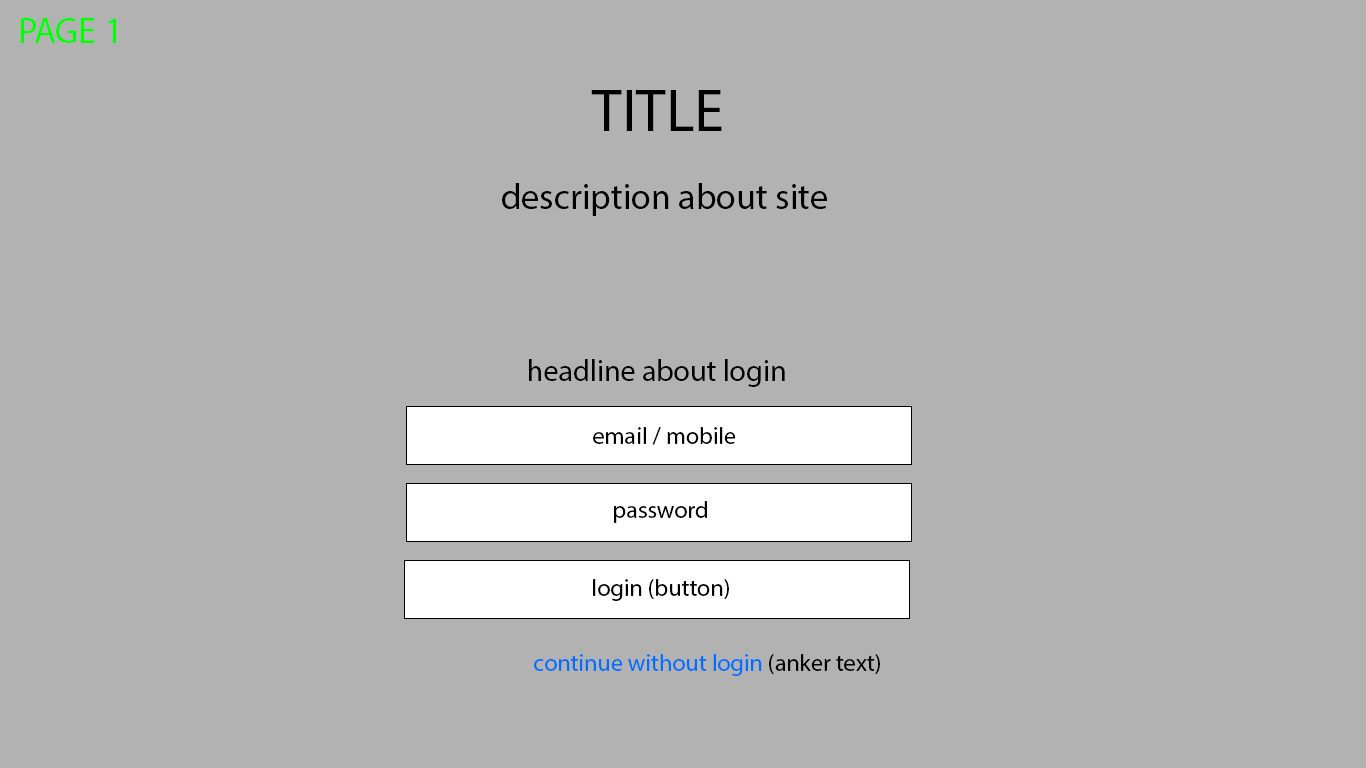
<style>
.page{position:relative;width:1366px;height:768px;background:#b2b2b2}
.page>*{position:absolute;margin:0}
.t1{font:36px "MyriadPro-Regular";color:#00ff04}
.t2{font:60px "MyriadPro-Regular";color:#000000}
.t3{font:36px "MyriadPro-Regular";color:#000000}
.t4{font:30px "MyriadPro-Regular";color:#000000}
.t5{font:24px "MyriadPro-Regular";color:#000000}
.t6{font:24px "MyriadPro-Regular";color:#006eff}
</style>
<div class="page">
<p class="t1" style="left:20px;top:18px;width:96px;height:25px">PAGE 1</p>
<p class="t2" style="left:591px;top:90px;width:131px;height:41px">TITLE</p>
<p class="t3" style="left:502px;top:183px;width:325px;height:33px">description about site</p>
<p class="t4" style="left:529px;top:359px;width:256px;height:28px">headline about login</p>
<p class="t5" style="left:593px;top:427px;width:143px;height:18px">email / mobile</p>
<p class="t5" style="left:614px;top:501px;width:93px;height:22px">password</p>
<p class="t5" style="left:593px;top:579px;width:136px;height:22px">login (button)</p>
<p class="t6" style="left:534px;top:654px;width:346px;height:22px">continue without login <span class="t5">(anker text)</span></p>
</div>
